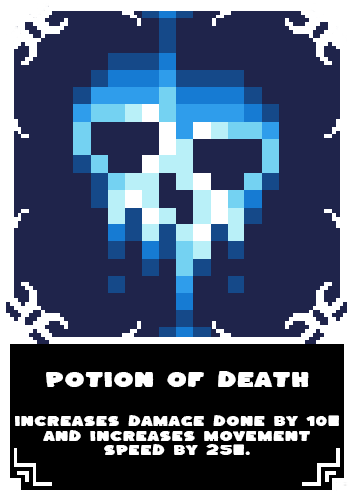
<style>
.page{position:relative;width:354px;height:496px;background:#1f244b}
.page>*{position:absolute;margin:0}
.t1{font:18px "Kaph";color:#ffffff;scale:1.27 1}
.t2{font:12px "Kaph";color:#ffffff;scale:1.27 1}
</style>
<div class="page">
<p class="t1" style="left:46px;top:371px;width:263px;height:16px">POTION OF DEATH</p>
<p class="t2" style="left:15px;top:415px;width:324px;height:40px;text-align:center">Increases damage done by 10%<br>and increases movement<br>speed by 25%.</p>
</div>
